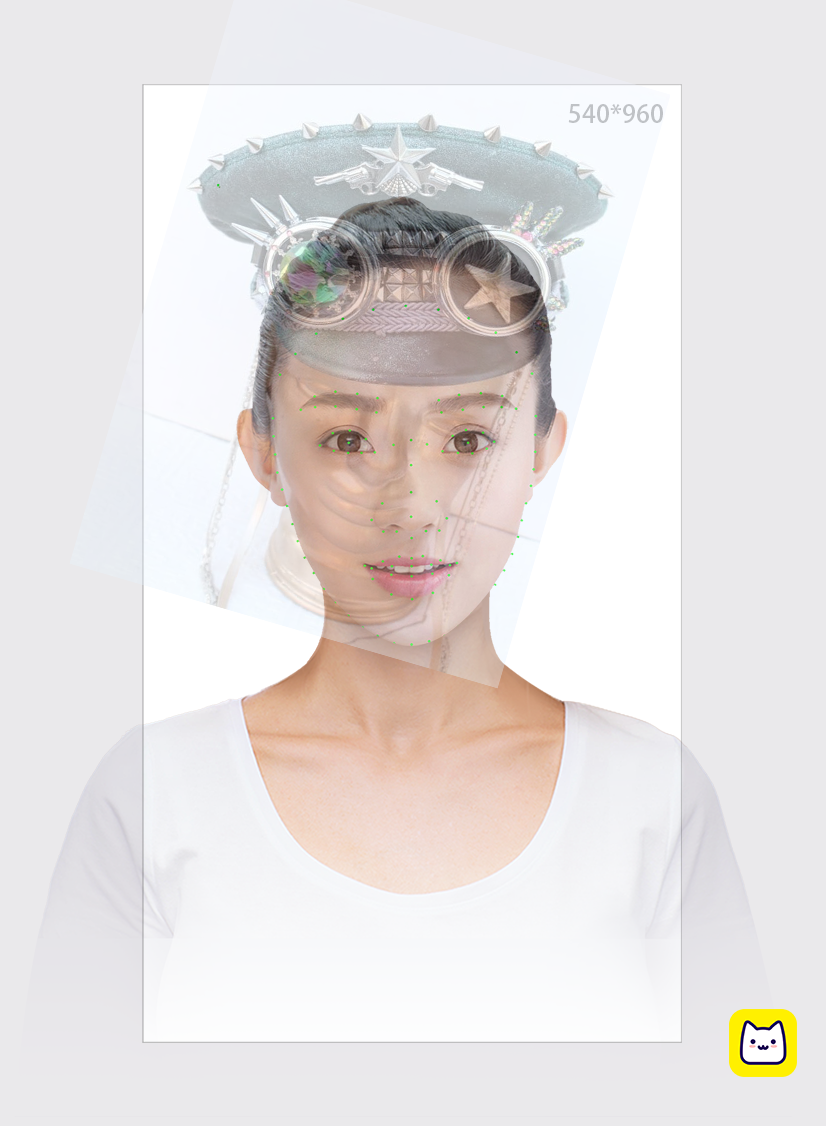
<style>
.page{position:relative;width:826px;height:1126px;background:#eae9eb}
.page>*{position:absolute;margin:0}
.t1{font:25px "AdobeHeitiStd-Regular";color:#bfc2c6}
</style>
<div class="page">
<p class="t1" style="left:568px;top:104px;width:95px;height:19px">540*960</p>
</div>
